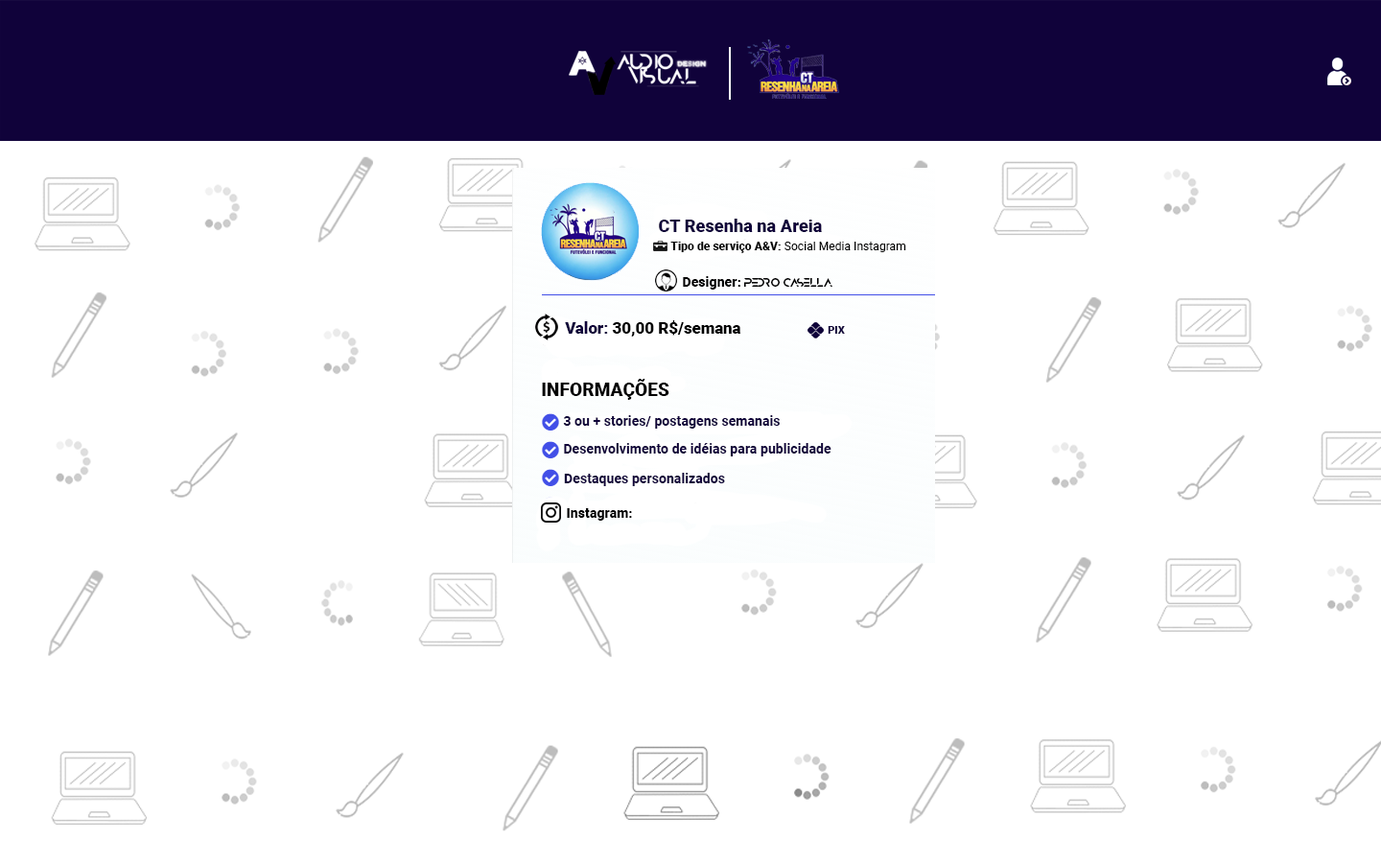
<style>
.page{position:relative;width:1381px;height:863px;background:#ffffff}
.page>*{position:absolute;margin:0}
.t1{font:17.3px "Roboto-Black";letter-spacing:0.005em;color:#10023a}
.t2{font:11.5px "Roboto-Regular";letter-spacing:0.005em;color:#000000}
.t3{font:11.5px "Roboto-Black";letter-spacing:0.005em;color:#000000}
.t4{font:10.6px "Anurati-Regular";letter-spacing:0.005em;color:#000000}
.t5{font:13.4px "Roboto-Black";letter-spacing:0.005em;color:#000000}
.t6{font:15.9px "Roboto-Black";letter-spacing:0.005em;color:#000000}
.t7{font:15.9px "Roboto-Black";letter-spacing:0.005em;color:#10023a}
.t8{font:10.6px "Roboto-Black";letter-spacing:0.005em;color:#10023a}
.t9{font:18.2px "Roboto-Black";letter-spacing:0.005em;color:#000000}
.t10{font:13.4px "Roboto-Bold";letter-spacing:0.005em;color:#10023a}
</style>
<div class="page">
<p class="t1" style="left:659px;top:219px;width:163px;height:13px">CT Resenha na Areia</p>
<p class="t2" style="left:670px;top:242px;width:236px;height:11px"><span class="t3">Tipo de serviço A&amp;V: </span>Social Media Instagram</p>
<p class="t4" style="left:683px;top:276px;width:150px;height:14px"><span class="t5">Designer: </span>PEDRO CASELLA</p>
<p class="t6" style="left:565px;top:320px;width:176px;height:17px"><span class="t7">Valor:</span> 30,00 R$/semana</p>
<p class="t8" style="left:828px;top:326px;width:17px;height:8px">PIX</p>
<p class="t9" style="left:542px;top:379px;width:128px;height:21px">INFORMAÇÕES</p>
<p class="t10" style="left:563px;top:415px;width:217px;height:14px">3 ou + stories/ postagens semanais</p>
<p class="t10" style="left:564px;top:443px;width:268px;height:14px">Desenvolvimento de idéias para publicidade</p>
<p class="t10" style="left:564px;top:473px;width:161px;height:13px">Destaques personalizados</p>
<p class="t5" style="left:567px;top:508px;width:65px;height:13px">Instagram:</p>
</div>
